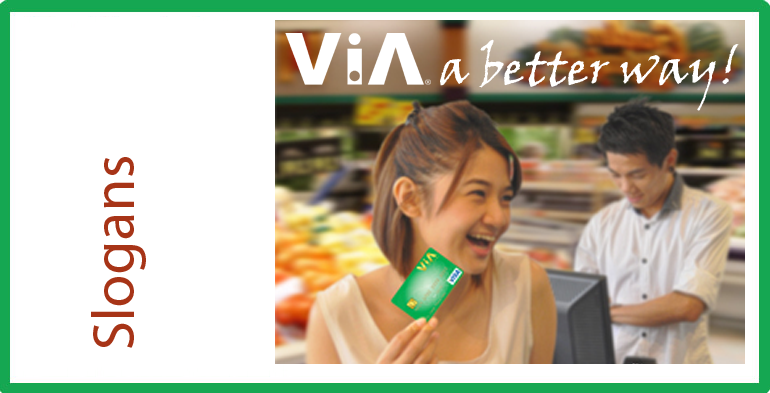
<style>
.page{position:relative;width:770px;height:393px;background:#ffffff}
.page>*{position:absolute;margin:0}
.t1{font:48px "VinerHandITC";color:#ffffff}
.t2{font:60px "MyriadPro-Regular";color:#a73417}
</style>
<div class="page">
<p class="t1" style="left:440px;top:39px;width:299px;height:72px">a better way!</p>
<p class="t2" style="left:91px;top:157px;width:55px;height:191px;rotate:-90deg">Slogans</p>
</div>
